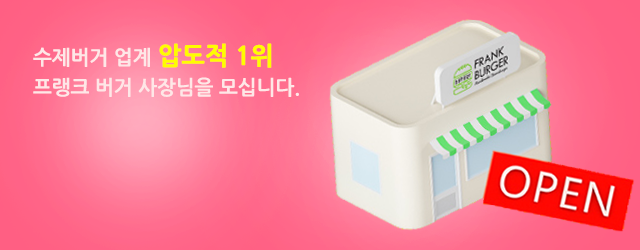
<style>
.page{position:relative;width:640px;height:250px}
.page>*{position:absolute;margin:0}
.t1{font:20px/30px "NanumGothicBold";color:#fee7e7}
.t2{font:25px/30px "NanumGothicExtraBold";color:#fffc00}
</style>
<div class="page">
<p class="t1" style="left:33px;top:43px;width:266px;height:54px">수제버거 업계 <span class="t2">압도적 1위<br></span>프랭크 버거 사장님을 모십니다.</p>
</div>
